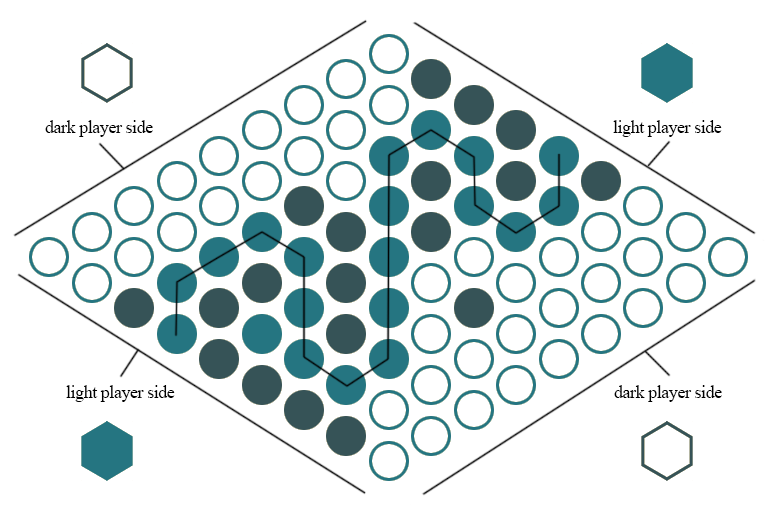
<style>
.page{position:relative;width:774px;height:505px;background:#ffffff}
.page>*{position:absolute;margin:0}
.t1{font:18px "TimesNewRomanPSMT";letter-spacing:-0.025em;color:#000000}
</style>
<div class="page">
<p class="t1" style="left:45px;top:120px;width:108px;height:17px">dark player side</p>
<p class="t1" style="left:613px;top:120px;width:109px;height:17px">light player side</p>
<p class="t1" style="left:66px;top:385px;width:109px;height:17px">light player side</p>
<p class="t1" style="left:614px;top:385px;width:108px;height:17px">dark player side</p>
</div>
